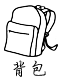
<style>
.page{position:relative;width:60px;height:80px;background:#ffffff}
.page>*{position:absolute;margin:0}
.t1{font:18px "STXingkaiSC-Light";letter-spacing:0.055em;color:#000000}
</style>
<div class="page">
<p class="t1" style="left:13px;top:60px;width:33px;height:17px">背包</p>
</div>
